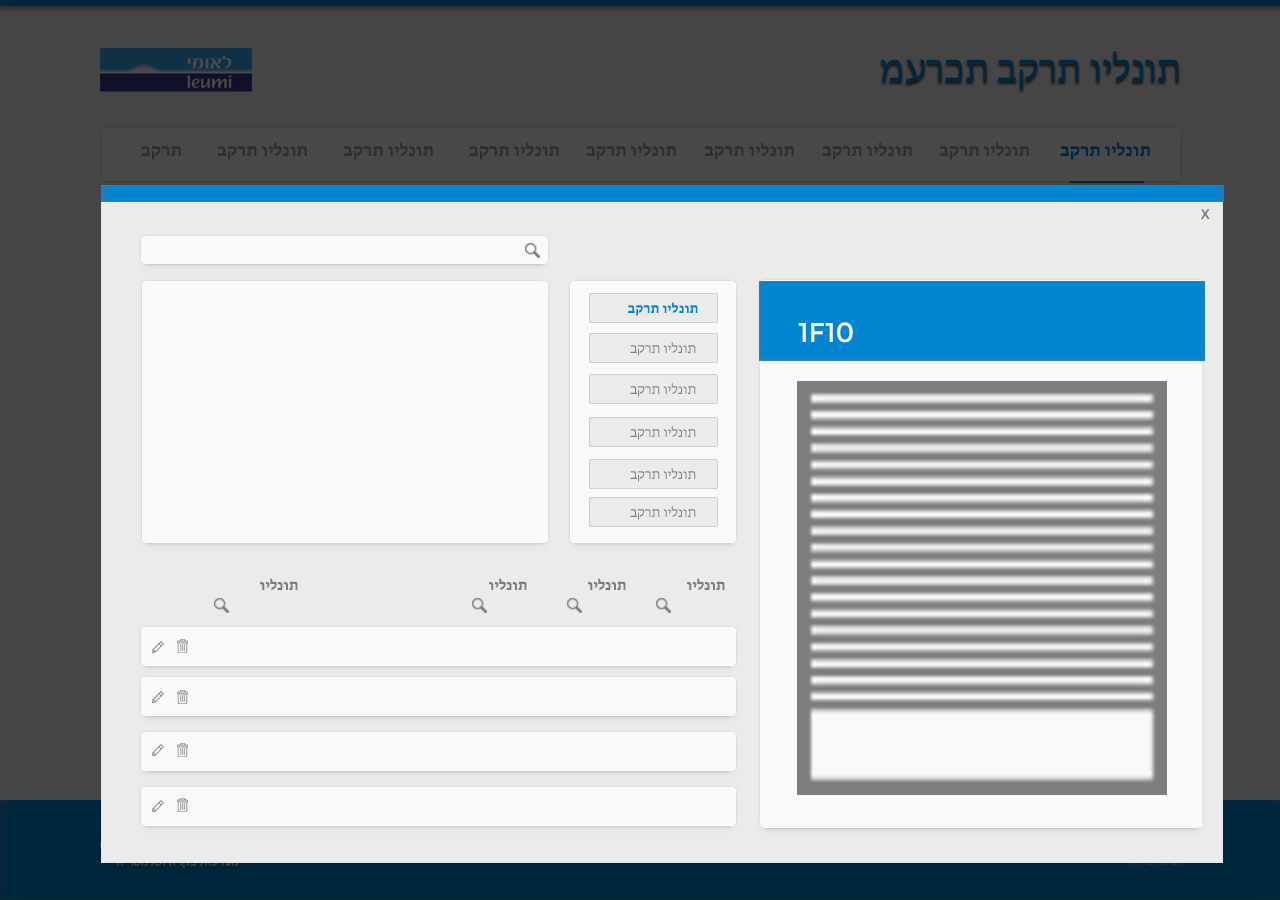
<style>
.page{position:relative;width:1280px;height:900px;background:#f9f9f9}
.page>*{position:absolute;margin:0}
.t1{font:39px "MyriadHebrew-Regular";color:#00273c;text-transform:uppercase}
.t2{font:18px "MyriadHebrew-Bold";color:#2f2f2f;text-transform:uppercase}
.t3{font:18px "MyriadHebrew-Bold";color:#00273c;text-transform:uppercase}
.t4{font:14px "Montserrat-Regular";letter-spacing:0.01em;color:#777a7c;text-transform:uppercase}
.t5{font:14px "MyriadHebrew-Bold";color:#0085cf;text-transform:uppercase}
.t6{font:27.3px "Montserrat-Regular";color:#fef9f9}
.t7{font:14px "MyriadHebrew-Regular";color:#7d7d7d;text-transform:uppercase}
.t8{font:15px "MyriadHebrew-Bold";color:#7d7d7d;text-transform:uppercase}
</style>
<div class="page">
<p class="t1" style="left:880px;top:51px;width:299px;height:38px">מערכת בקרת וילנות</p>
<p class="t2" style="left:141px;top:146px;width:40px;height:14px">בקרת</p>
<p class="t2" style="left:217px;top:142px;width:90px;height:18px">בקרת וילנות</p>
<p class="t2" style="left:343px;top:142px;width:90px;height:18px">בקרת וילנות</p>
<p class="t2" style="left:469px;top:142px;width:90px;height:18px">בקרת וילנות</p>
<p class="t2" style="left:586px;top:142px;width:90px;height:18px">בקרת וילנות</p>
<p class="t2" style="left:704px;top:142px;width:90px;height:18px">בקרת וילנות</p>
<p class="t2" style="left:822px;top:142px;width:90px;height:18px">בקרת וילנות</p>
<p class="t2" style="left:939px;top:142px;width:90px;height:18px">בקרת וילנות</p>
<p class="t3" style="left:1060px;top:142px;width:90px;height:18px">בקרת וילנות</p>
<p class="t4" style="left:1200px;top:209px;width:10px;height:10px">X</p>
<p class="t5" style="left:628px;top:302px;width:70px;height:14px">בקרת וילנות</p>
<p class="t6" style="left:798px;top:322px;width:55px;height:21px">1F10</p>
<p class="t7" style="left:630px;top:342px;width:66px;height:14px">בקרת וילנות</p>
<p class="t7" style="left:630px;top:383px;width:66px;height:14px">בקרת וילנות</p>
<p class="t7" style="left:630px;top:426px;width:66px;height:14px">בקרת וילנות</p>
<p class="t7" style="left:630px;top:468px;width:66px;height:14px">בקרת וילנות</p>
<p class="t7" style="left:630px;top:506px;width:66px;height:14px">בקרת וילנות</p>
<p class="t8" style="left:260px;top:578px;width:38px;height:12px">וילנות</p>
<p class="t8" style="left:489px;top:578px;width:38px;height:12px">וילנות</p>
<p class="t8" style="left:588px;top:578px;width:38px;height:12px">וילנות</p>
<p class="t8" style="left:687px;top:578px;width:38px;height:12px">וילנות</p>
</div>
